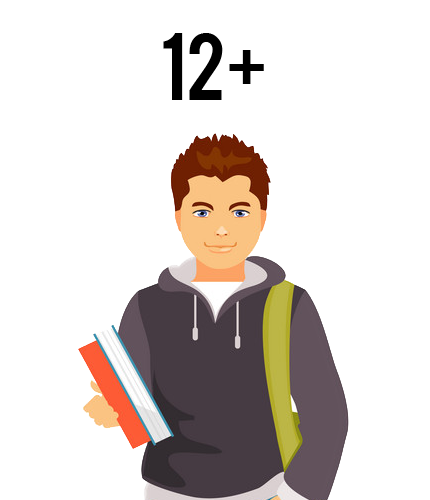
<style>
.page{position:relative;width:430px;height:500px;background:#ffffff}
.page>*{position:absolute;margin:0}
.t1{font:75px "Bebas";color:#000000}
</style>
<div class="page">
<p class="t1" style="left:163px;top:33px;width:101px;height:67px">12+</p>
</div>
